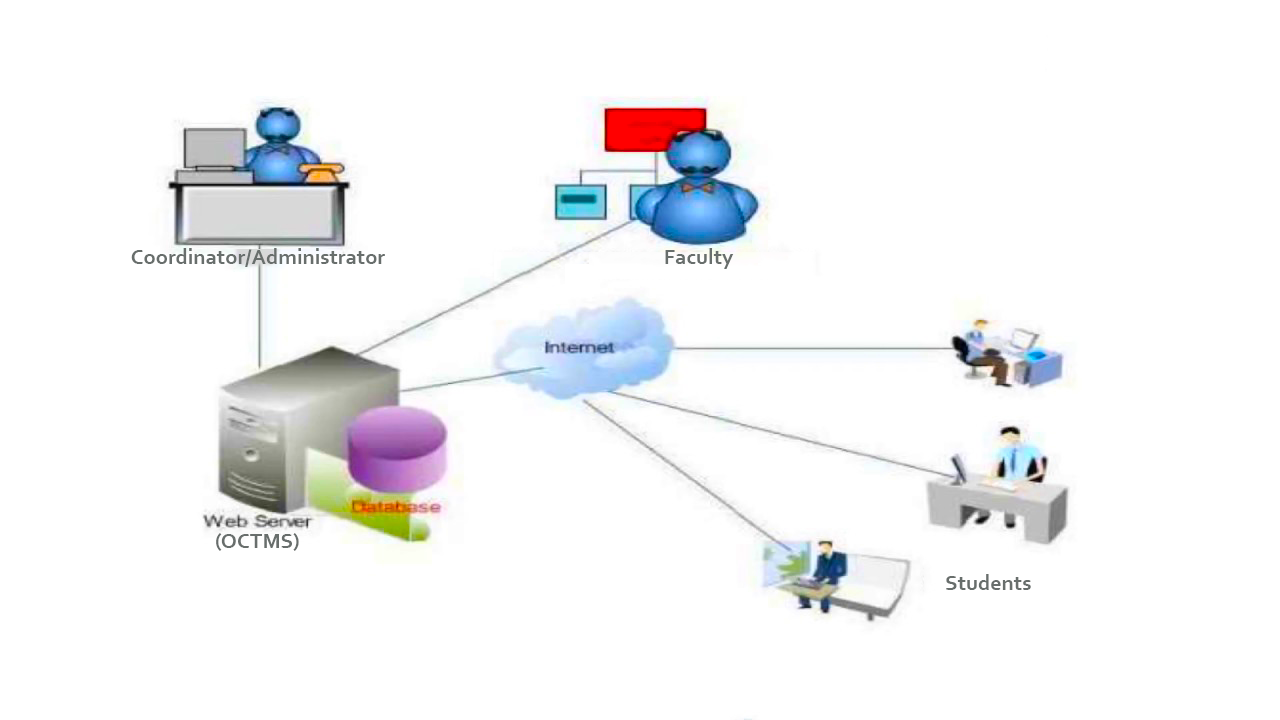
<style>
.page{position:relative;width:1280px;height:720px;background:#ffffff}
.page>*{position:absolute;margin:0}
.t1{font:22px "Corbel-Bold";color:#686d6c}
</style>
<div class="page">
<p class="t1" style="left:131px;top:248px;width:254px;height:19px">Coordinator/Administrator</p>
<p class="t1" style="left:665px;top:248px;width:69px;height:21px">Faculty</p>
<p class="t1" style="left:216px;top:533px;width:83px;height:18px">(OCTMS)</p>
<p class="t1" style="left:946px;top:574px;width:85px;height:16px">Students</p>
</div>
